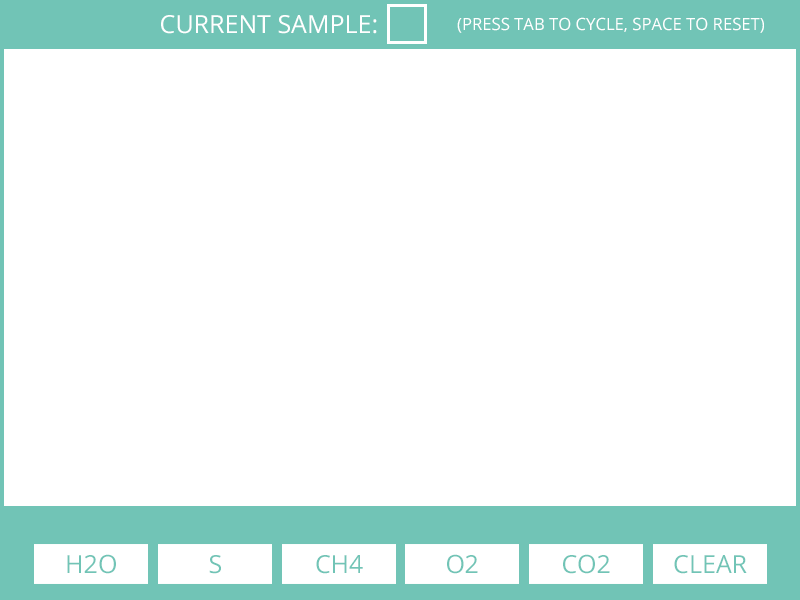
<style>
.page{position:relative;width:800px;height:600px;background:#ffffff}
.page>*{position:absolute;margin:0}
.t1{font:25px "OpenSans";color:#ffffff}
.t2{font:16.7px "OpenSans";color:#ffffff}
.t3{font:25px "OpenSans";color:#71c4b6}
</style>
<div class="page">
<p class="t1" style="left:161px;top:15px;width:216px;height:19px">CURRENT SAMPLE:</p>
<p class="t2" style="left:457px;top:17px;width:307px;height:16px">(PRESS TAB TO CYCLE, SPACE TO RESET)</p>
<p class="t3" style="left:67px;top:554px;width:49px;height:20px">H2O</p>
<p class="t3" style="left:209px;top:555px;width:12px;height:19px">S</p>
<p class="t3" style="left:316px;top:555px;width:47px;height:19px">CH4</p>
<p class="t3" style="left:447px;top:554px;width:31px;height:20px">O2</p>
<p class="t3" style="left:563px;top:554px;width:47px;height:20px">CO2</p>
<p class="t3" style="left:674px;top:555px;width:73px;height:19px">CLEAR</p>
</div>
